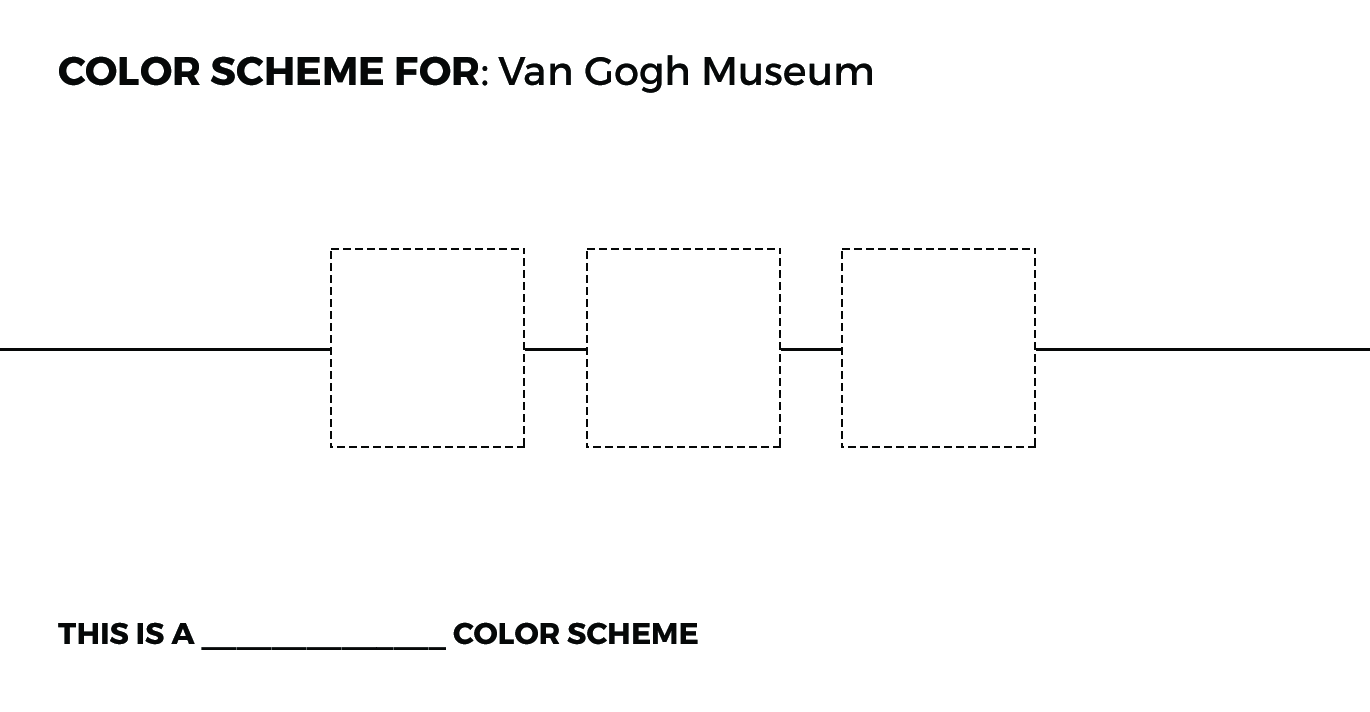
<style>
.page{position:relative;width:1370px;height:712px;background:#ffffff}
.page>*{position:absolute;margin:0}
.t1{font:40px "Montserrat-Bold";color:#060808;text-transform:uppercase}
.t2{font:40px "SourceSansPro-Regular";color:#060808}
.t3{font:40px "Montserrat-Regular";color:#060808}
.t4{font:30px "Montserrat-Bold";color:#060808;text-transform:uppercase}
.t5{font:30px "Montserrat-Bold";color:#060808}
</style>
<div class="page">
<p class="t1" style="left:59px;top:55px;width:813px;height:38px">Color Scheme for<span class="t2">: </span><span class="t3">Van Gogh Museum</span></p>
<p class="t4" style="left:58px;top:622px;width:640px;height:28px">THIS IS A ______________ <span class="t5">COLOR SCHEME</span></p>
</div>
